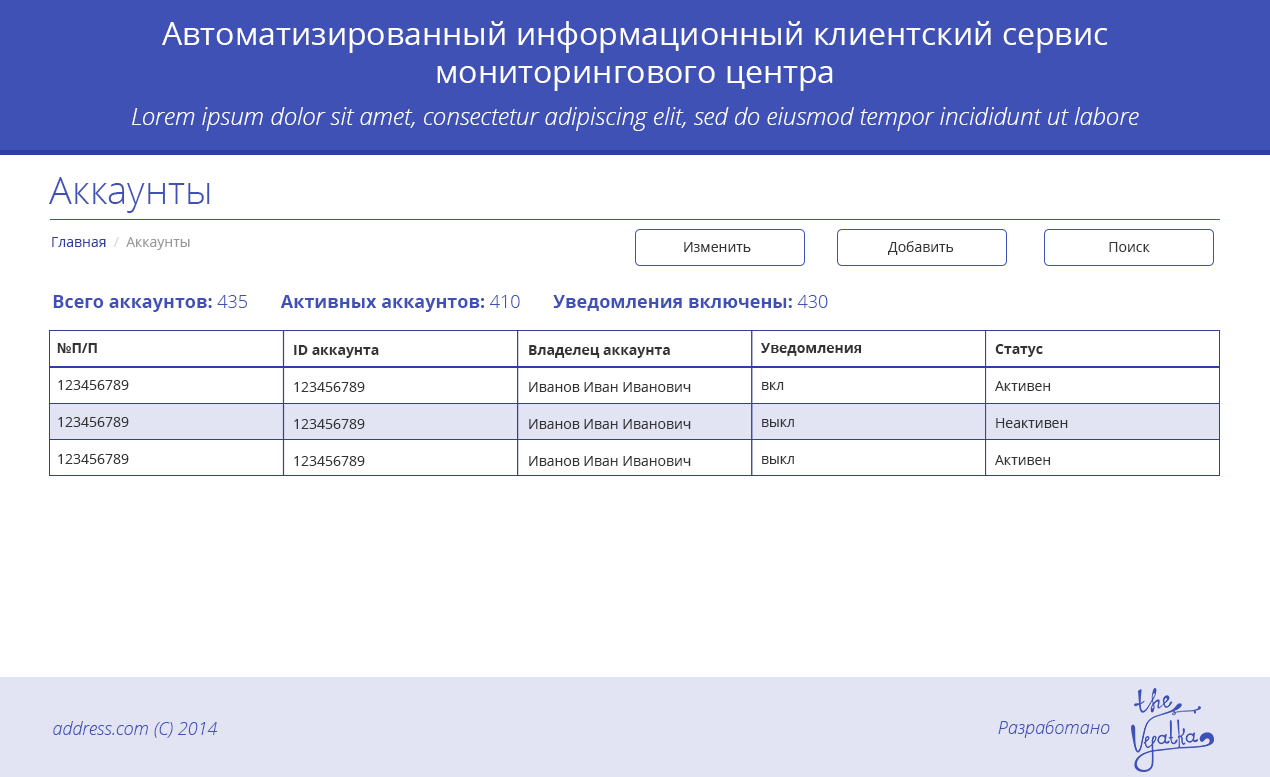
<style>
.page{position:relative;width:1270px;height:777px;background:#ffffff}
.page>*{position:absolute;margin:0}
.t1{font:32px "OpenSans";color:#ffffff}
.t2{font:24px "OpenSansLight-Italic";color:#ffffff}
.t3{font:38px "OpenSans-Light";color:#3f51b5}
.t4{font:14px "OpenSans";color:#999999}
.t5{font:14px "OpenSans";color:#303f9f}
.t6{font:14px "OpenSans";color:#d8d8d8}
.t7{font:14px "OpenSans";color:#333333}
.t8{font:18px "OpenSans-Bold";color:#3f51b5}
.t9{font:18px "OpenSans-Light";color:#3f51b5}
.t10{font:14px/37px "OpenSans";color:#333333}
.t11{font:14px/37px "OpenSans-Bold";color:#333333}
.t12{font:18px "OpenSansLight-Italic";color:#3f51b5}
</style>
<div class="page">
<p class="t1" style="left:162px;top:21px;width:946px;height:70px;text-align:center">Автоматизированный информационный клиентский сервис<br>мониторингового центра</p>
<p class="t2" style="left:132px;top:107px;width:1007px;height:24px">Lorem ipsum dolor sit amet, consectetur adipiscing elit, sed do eiusmod tempor incididunt ut labore</p>
<p class="t3" style="left:49px;top:177px;width:161px;height:36px">Аккаунты</p>
<p class="t4" style="left:52px;top:237px;width:138px;height:13px"><span class="t5">Главная  </span><span class="t6">/</span>  Аккаунты</p>
<p class="t7" style="left:684px;top:242px;width:67px;height:10px">Изменить</p>
<p class="t7" style="left:888px;top:241px;width:66px;height:14px">Добавить</p>
<p class="t7" style="left:1109px;top:242px;width:41px;height:10px">Поиск</p>
<p class="t8" style="left:53px;top:295px;width:775px;height:17px">Всего аккаунтов:<span class="t9"> 435       </span>Активных аккаунтов:<span class="t9"> 410       </span>Уведомления включены:<span class="t9"> 430</span></p>
<p class="t10" style="left:57px;top:343px;width:72px;height:121px"><span class="t11">№П/П<br></span>123456789<br>123456789<br>123456789</p>
<p class="t10" style="left:294px;top:345px;width:85px;height:121px"><span class="t11">ID аккаунта<br></span>123456789<br>123456789<br>123456789</p>
<p class="t10" style="left:529px;top:345px;width:162px;height:121px"><span class="t11">Владелец аккаунта<br></span>Иванов Иван Иванович<br>Иванов Иван Иванович<br>Иванов Иван Иванович</p>
<p class="t10" style="left:761px;top:343px;width:101px;height:121px"><span class="t11">Уведомления<br></span>вкл<br>выкл<br>выкл</p>
<p class="t10" style="left:995px;top:344px;width:73px;height:121px"><span class="t11">Статус<br></span>Активен<br>Неактивен<br>Активен</p>
<p class="t12" style="left:53px;top:721px;width:165px;height:17px">address.com (C) 2014</p>
<p class="t12" style="left:998px;top:720px;width:112px;height:18px">Разработано</p>
</div>
